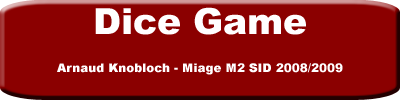
<style>
.page{position:relative;width:400px;height:100px;background:#8b0000}
.page>*{position:absolute;margin:0}
.t1{font:36px "Arial-Black";color:#fffeff}
.t2{font:12px "Arial-Black";color:#fffeff}
</style>
<div class="page">
<p class="t1" style="left:95px;top:7px;width:211px;height:28px">Dice Game</p>
<p class="t2" style="left:57px;top:63px;width:286px;height:12px">Arnaud Knobloch - Miage M2 SID 2008/2009</p>
</div>
